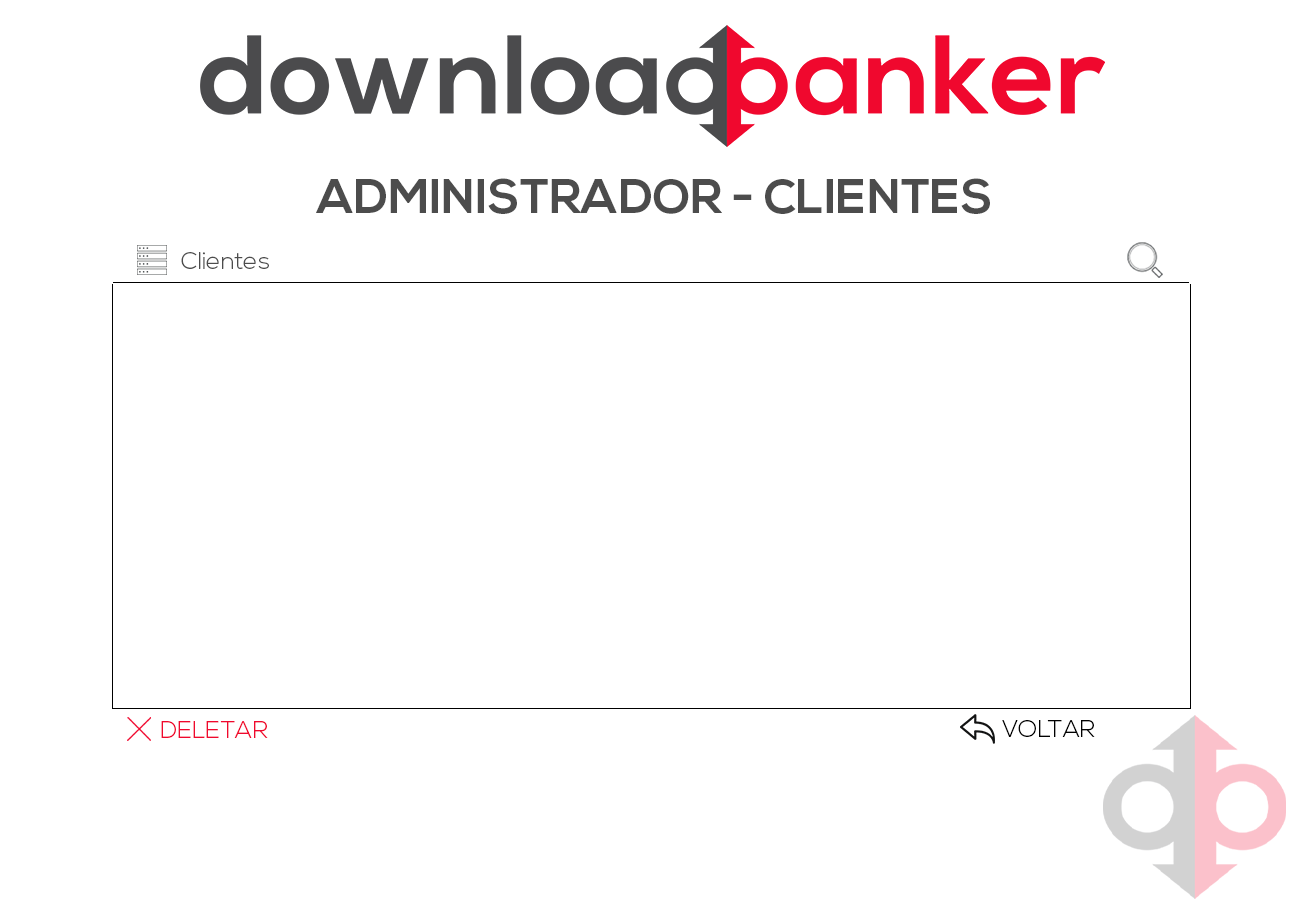
<style>
.page{position:relative;width:1305px;height:905px;background:#ffffff}
.page>*{position:absolute;margin:0}
.t1{font:48px "NexaBold";color:#4c4c4c}
.t2{font:24px "NexaLight";color:#4c4c4c}
.t3{font:24px "NexaLight";color:#f0082e}
.t4{font:24px "NexaLight";color:#000000}
</style>
<div class="page">
<p class="t1" style="left:316px;top:178px;width:674px;height:36px">ADMINISTRADOR - CLIENTES</p>
<p class="t2" style="left:181px;top:252px;width:88px;height:17px">Clientes</p>
<p class="t3" style="left:161px;top:721px;width:107px;height:17px">DELETAR</p>
<p class="t4" style="left:1002px;top:720px;width:93px;height:17px">VOLTAR</p>
</div>
